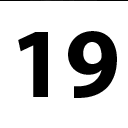
<style>
.page{position:relative;width:128px;height:128px;background:#ffffff}
.page>*{position:absolute;margin:0}
.t1{font:99.7px "MyriadHebrew-Bold";color:#000000}
</style>
<div class="page">
<p class="t1" style="left:18px;top:30px;width:99px;height:67px">19</p>
</div>
